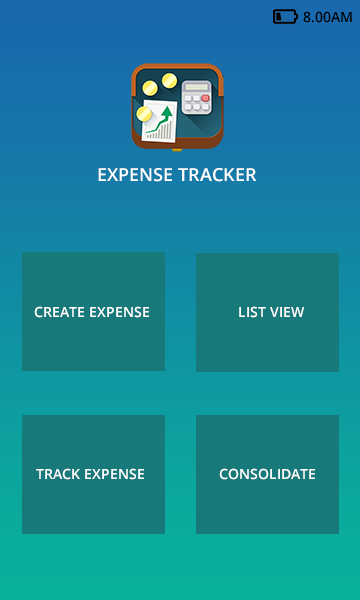
<style>
.page{position:relative;width:360px;height:600px;background:#18797a}
.page>*{position:absolute;margin:0}
.t1{font:14px "OpenSans-Semibold";color:#000000}
.t2{font:18px "OpenSans-Semibold";color:#ffffff}
.t3{font:14px "OpenSans-Semibold";color:#ffffff}
</style>
<div class="page">
<p class="t1" style="left:303px;top:11px;width:49px;height:12px">8.00AM</p>
<p class="t2" style="left:98px;top:168px;width:159px;height:14px">EXPENSE TRACKER</p>
<p class="t3" style="left:34px;top:306px;width:115px;height:12px">CREATE EXPENSE</p>
<p class="t3" style="left:239px;top:306px;width:65px;height:12px">LIST VIEW</p>
<p class="t3" style="left:36px;top:468px;width:108px;height:12px">TRACK EXPENSE</p>
<p class="t3" style="left:219px;top:468px;width:96px;height:12px">CONSOLIDATE</p>
</div>
